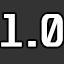
<style>
.page{position:relative;width:64px;height:64px;background:#333333}
.page>*{position:absolute;margin:0}
.t1{font:40px "Unispace-Bold";letter-spacing:-0.1em;color:#ffffff;text-transform:uppercase}
</style>
<div class="page">
<p class="t1" style="left:1px;top:14px;width:62px;height:33px">1.0</p>
</div>
